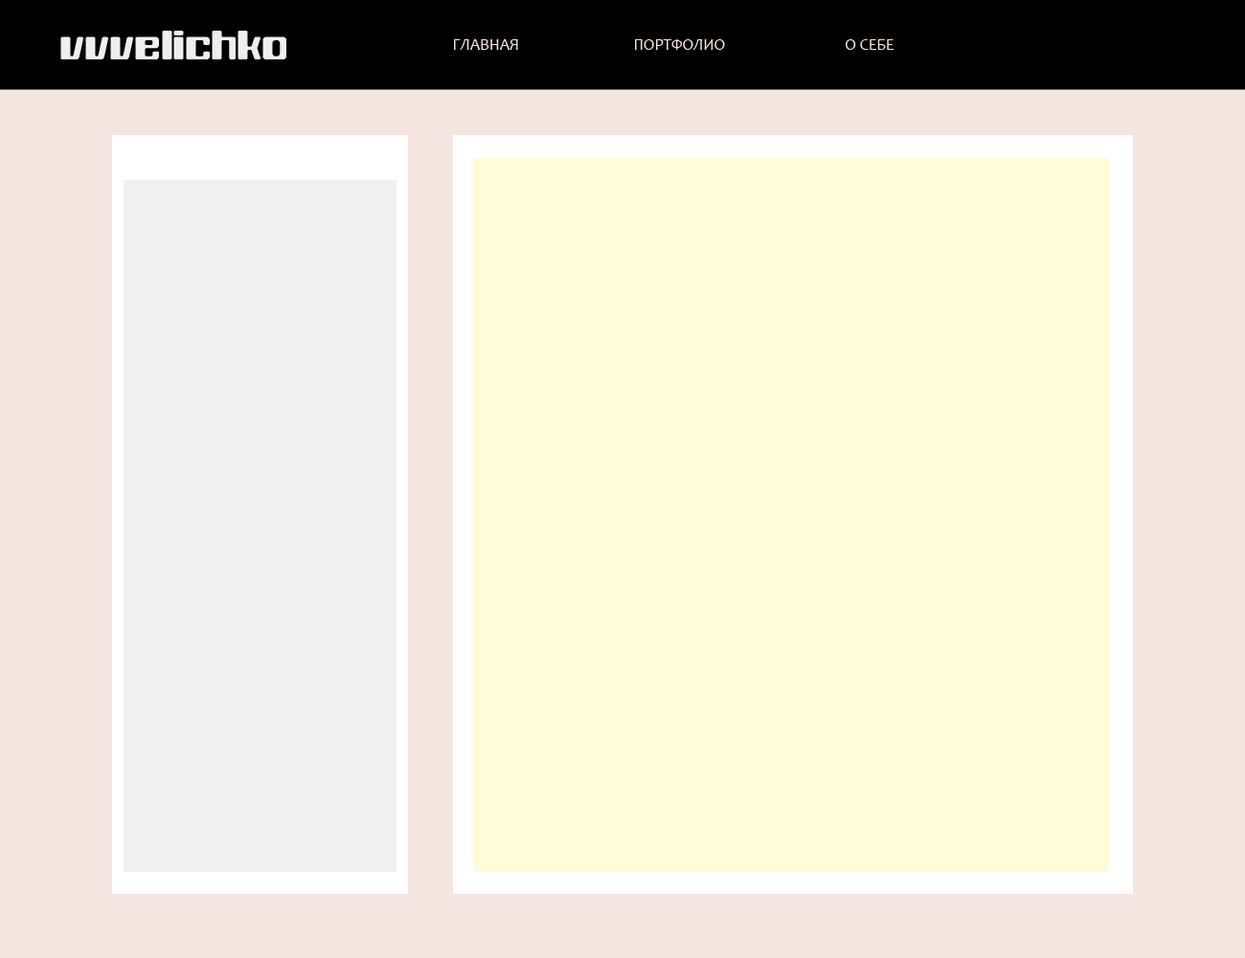
<style>
.page{position:relative;width:1245px;height:958px;background:#fffbd6}
.page>*{position:absolute;margin:0}
.t1{font:39.9px "KBBlackWolf";color:#efefef}
.t2{font:39.9px "Highlander-Regular";color:#efefef}
.t3{font:16px "Candara";color:#f6e4df}
</style>
<div class="page">
<p class="t1" style="left:60px;top:31px;width:226px;height:28px"><span class="t2"><br></span>vvvelichko</p>
<p class="t3" style="left:454px;top:39px;width:64px;height:11px">ГЛАВНАЯ</p>
<p class="t3" style="left:635px;top:39px;width:90px;height:11px">ПОРТФОЛИО</p>
<p class="t3" style="left:846px;top:39px;width:49px;height:11px">О СЕБЕ</p>
</div>
